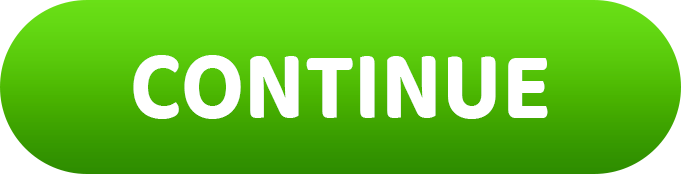
<style>
.page{position:relative;width:681px;height:174px}
.page>*{position:absolute;margin:0}
.t1{font:98.5px "BalooThambi2-Bold";color:#ffffff;scale:0.91 1}
</style>
<div class="page">
<p class="t1" style="left:133px;top:55px;width:415px;height:64px">CONTINUE</p>
</div>
